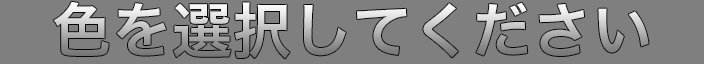
<style>
.page{position:relative;width:704px;height:64px;background:#7f7f7f}
.page>*{position:absolute;margin:0}
.t1{font:60px "HiraKakuProN-W6"}
</style>
<div class="page">
<p class="t1" style="left:53px;top:1px;width:596px;height:58px">色を選択してください</p>
</div>
